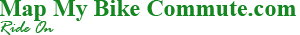
<style>
.page{position:relative;width:300px;height:35px;background:#ffffff}
.page>*{position:absolute;margin:0}
.t1{font:24px "TimesNewRomanPS-BoldMT";color:#148721}
.t2{font:18px "RageItalic";color:#148721}
</style>
<div class="page">
<p class="t1" style="left:0px;top:0px;width:296px;height:21px">Map My Bike Commute.com</p>
<p class="t2" style="left:0px;top:21px;width:54px;height:14px">Ride On</p>
</div>
